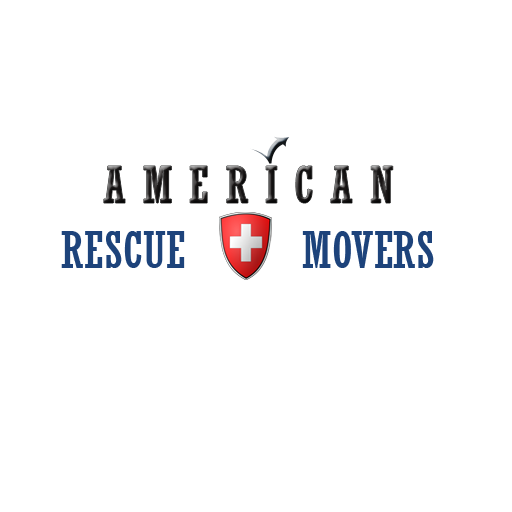
<style>
.page{position:relative;width:512px;height:512px;background:#ffffff}
.page>*{position:absolute;margin:0}
.t1{font:50px "Rockwell-Condensed";color:#1b1818}
.t2{font:50px "Rockwell-Condensed";color:#1d437b}
</style>
<div class="page">
<p class="t1" style="left:103px;top:166px;width:290px;height:37px">A M E R I C A N</p>
<p class="t2" style="left:61px;top:231px;width:373px;height:37px">RESCUE       MOVERS</p>
</div>
